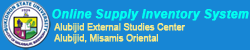
<style>
.page{position:relative;width:250px;height:50px;background:#1786d5}
.page>*{position:absolute;margin:0}
.t1{font:12.1px "Arial-BoldItalicMT";color:#00fff0;font-weight:bold}
.t2{font:8.6px "ArialMT";color:#f0e68c;font-weight:bold}
</style>
<div class="page">
<p class="t1" style="left:52px;top:9px;width:197px;height:12px">Online Supply Inventory System</p>
<p class="t2" style="left:54px;top:23px;width:131px;height:21px">Alubijid External Studies Center<br>Alubijid, Misamis Oriental</p>
</div>
